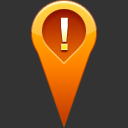
<style>
.page{position:relative;width:128px;height:128px;background:#333333}
.page>*{position:absolute;margin:0}
.t1{font:45px "Arial-BoldMT"}
</style>
<div class="page">
<p class="t1" style="left:61px;top:17px;width:7px;height:33px">!</p>
</div>
